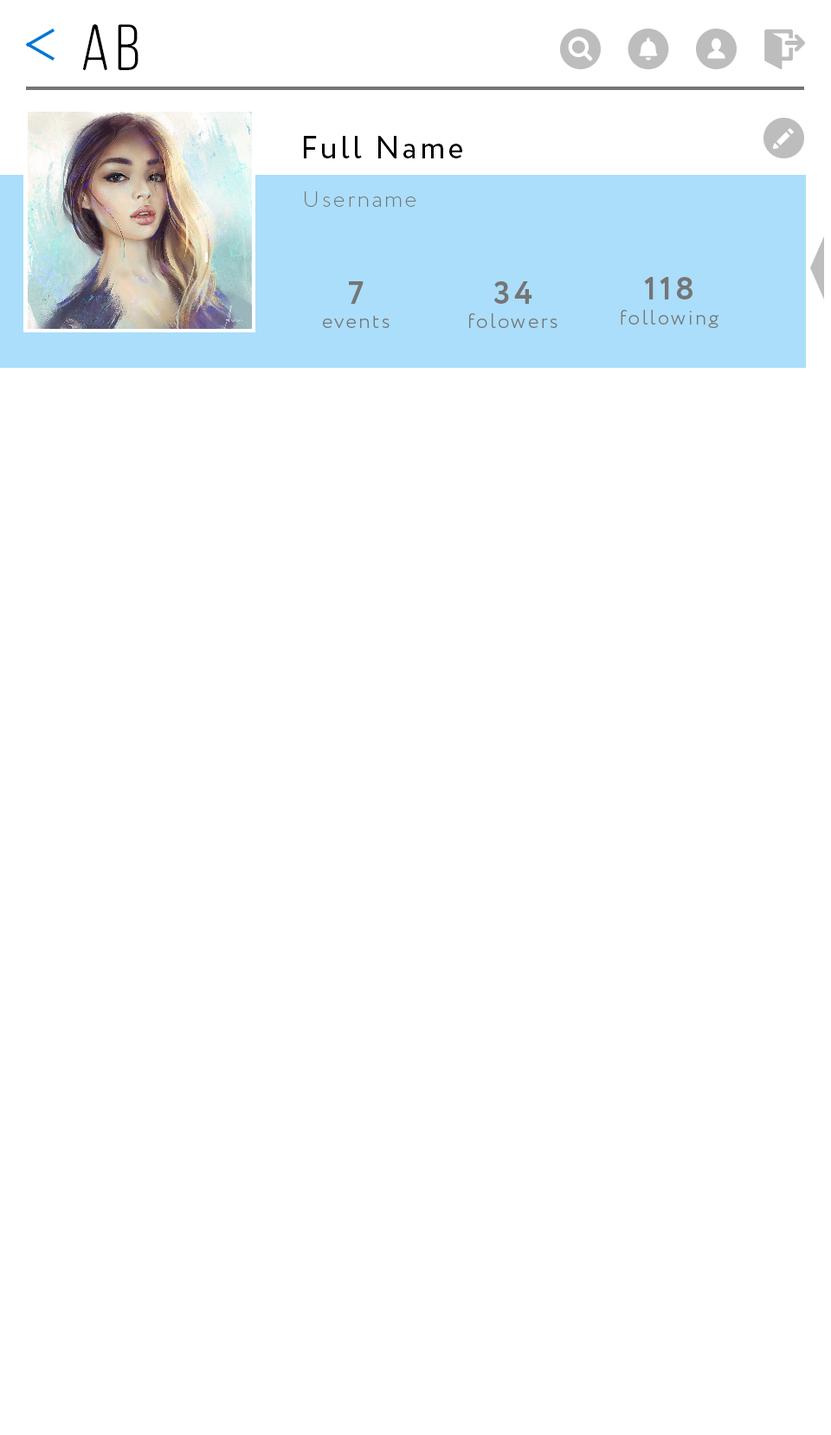
<style>
.page{position:relative;width:831px;height:1435px;background:#ffffff}
.page>*{position:absolute;margin:0}
.t1{font:65.4px "ClutchSans-Regular";letter-spacing:0.1em;color:#000000}
.t2{font:31.2px "Circe-Regular";letter-spacing:0.1em;color:#000000}
.t3{font:22.5px "Circe-ExtraLight";letter-spacing:0.1em;color:#757575}
.t4{font:20.6px "Circe-Light";letter-spacing:0.1em;color:#757575}
.t5{font:32.2px "Circe-Bold";letter-spacing:0.1em;color:#757575}
</style>
<div class="page">
<p class="t1" style="left:83px;top:24px;width:55px;height:46px">Ab</p>
<p class="t2" style="left:304px;top:136px;width:158px;height:22px">Full Name</p>
<p class="t3" style="left:305px;top:191px;width:110px;height:16px">Username</p>
<p class="t4" style="left:323px;top:281px;width:66px;height:47px;text-align:center"><span class="t5">7<br></span>events</p>
<p class="t4" style="left:469px;top:281px;width:88px;height:47px;text-align:center"><span class="t5">34<br></span>folowers</p>
<p class="t4" style="left:621px;top:277px;width:97px;height:51px;text-align:center"><span class="t5">118<br></span>following</p>
</div>
